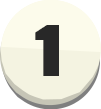
<style>
.page{position:relative;width:101px;height:109px;background:#f4f3e1}
.page>*{position:absolute;margin:0}
.t1{font:72px "MovaviGrotesqueBlack";color:#282828}
</style>
<div class="page">
<p class="t1" style="left:35px;top:25px;width:24px;height:51px">1</p>
</div>
